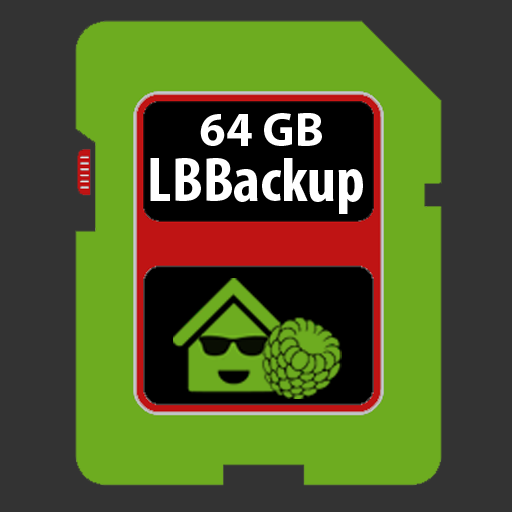
<style>
.page{position:relative;width:512px;height:512px;background:#333333}
.page>*{position:absolute;margin:0}
.t1{font:48px "MyriadPro-Bold";color:#ffffff}
.t2{font:64px "MyriadPro-BoldCond";color:#ffffff}
</style>
<div class="page">
<p class="t1" style="left:200px;top:113px;width:122px;height:33px">64 GB</p>
<p class="t2" style="left:150px;top:158px;width:213px;height:56px">LBBackup</p>
</div>
